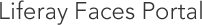
<style>
.page{position:relative;width:202px;height:25px;background:#ffffff}
.page>*{position:absolute;margin:0}
.t1{font:24px "Avenir-Light";color:#333333}
</style>
<div class="page">
<p class="t1" style="left:0px;top:0px;width:202px;height:25px">Liferay Faces Portal</p>
</div>
